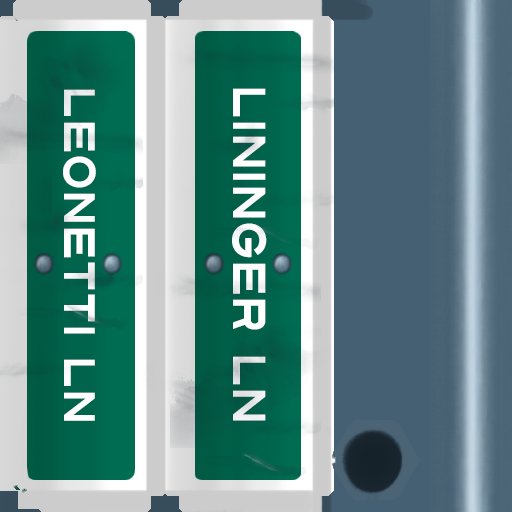
<style>
.page{position:relative;width:512px;height:512px}
.page>*{position:absolute;margin:0}
.t1{font:44px "Turnpike";color:#fefeff;scale:0.75 1}
.t2{font:46px "Turnpike";color:#fefeff;scale:0.75 1}
</style>
<div class="page">
<p class="t1" style="left:63px;top:89px;width:33px;height:332px;rotate:90deg">Leonetti Ln</p>
<p class="t2" style="left:232px;top:88px;width:35px;height:333px;rotate:90deg">Lininger Ln</p>
</div>
